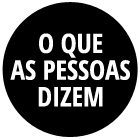
<style>
.page{position:relative;width:140px;height:140px;background:#000000}
.page>*{position:absolute;margin:0}
.t1{font:26.8px/26.7px "OpenSans-CondensedBold";color:#ffffff}
</style>
<div class="page">
<p class="t1" style="left:10px;top:33px;width:120px;height:74px;text-align:center">O QUE<br>AS PESSOAS<br>DIZEM</p>
</div>
